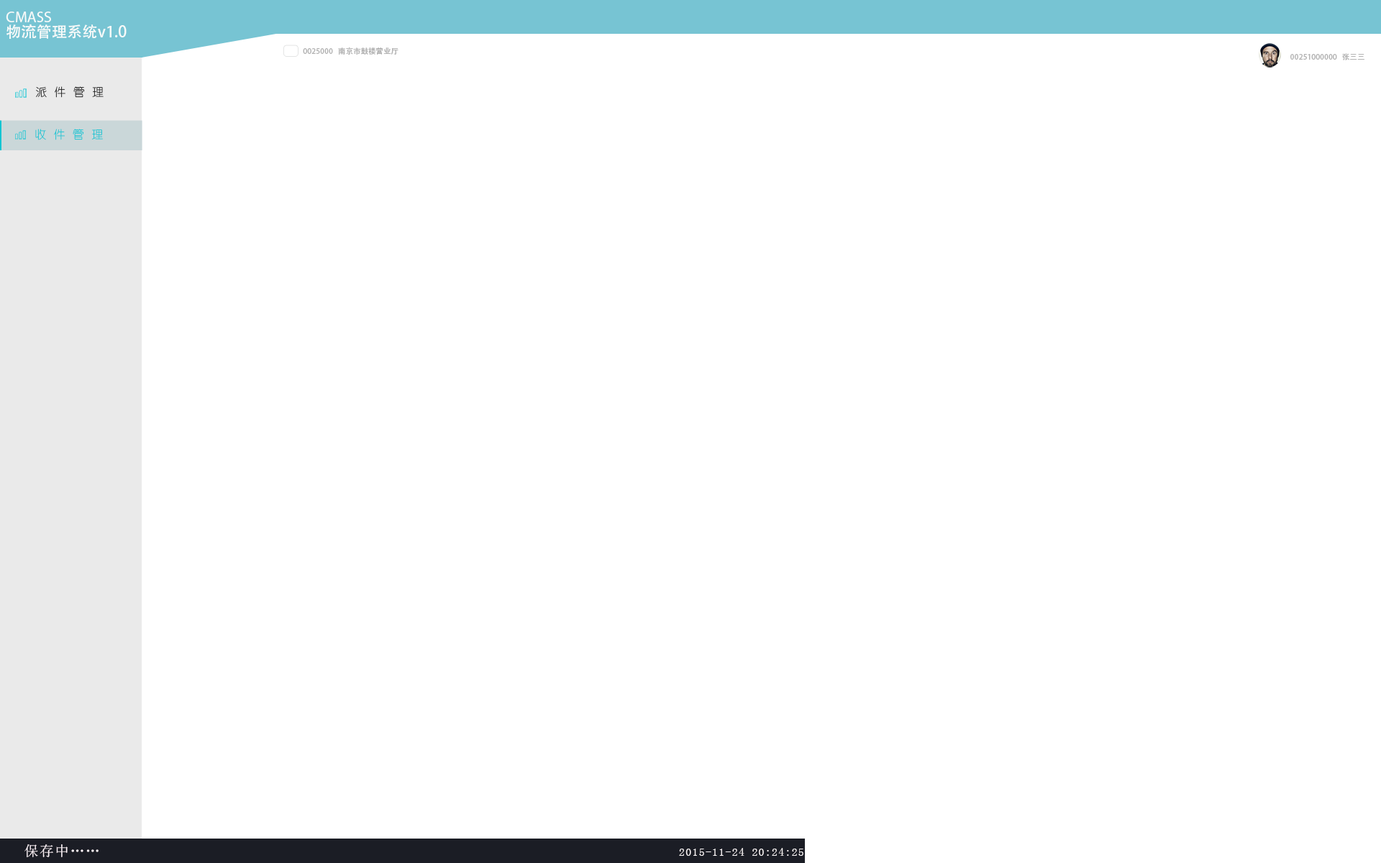
<style>
.page{position:relative;width:1381px;height:863px;background:#ffffff}
.page>*{position:absolute;margin:0}
.t1{font:15.3px/15.3px "AdobeHeitiStd-Regular";color:#f7faf9}
.t2{font:15.3px/15.3px "MyriadPro-Regular";color:#f7faf9}
.t3{font:7.6px "AdobeHeitiStd-Regular";color:#b3b3b3}
.t4{font:7.6px "AdobeHeitiStd-Regular";color:#b3b3b3;text-transform:uppercase}
.t5{font:11.4px "YouYuan";letter-spacing:0.083em;text-transform:uppercase}
.t6{font:11.4px "YouYuan";letter-spacing:0.083em;color:#00c4d3;text-transform:uppercase}
.t7{font:14.1px "SimSun";letter-spacing:0.083em;color:#fef5fa;text-transform:uppercase}
.t8{font:11.3px "YouYuan";letter-spacing:0.083em;color:#fcf7f8;text-transform:uppercase}
</style>
<div class="page">
<p class="t1" style="left:6px;top:12px;width:121px;height:27px"><span class="t2">CMASS<br></span>物流管理系统v1.0</p>
<p class="t3" style="left:303px;top:47px;width:96px;height:8px">0025000   南京市鼓楼营业厅</p>
<p class="t4" style="left:1291px;top:53px;width:74px;height:7px">00251000000   张三三</p>
<p class="t5" style="left:36px;top:86px;width:68px;height:12px">派 件 管 理</p>
<p class="t6" style="left:35px;top:129px;width:68px;height:11px">收 件 管 理</p>
<p class="t7" style="left:24px;top:845px;width:75px;height:13px">保存中……</p>
<p class="t8" style="left:679px;top:848px;width:125px;height:8px">2015-11-24 20:24:25</p>
</div>
